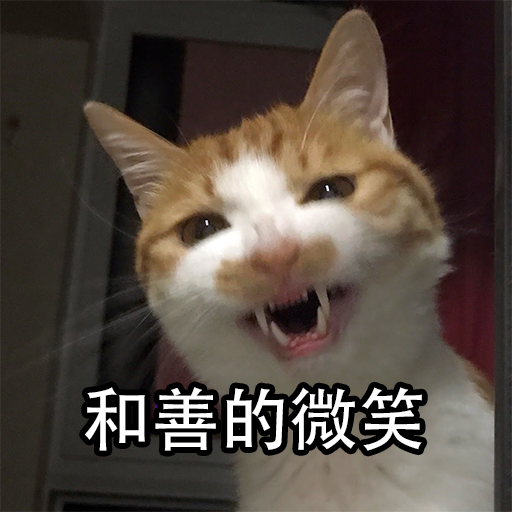
<style>
.page{position:relative;width:512px;height:512px}
.page>*{position:absolute;margin:0}
.t1{font:68.9px "AdobeHeitiStd-Regular";color:#ffffff}
</style>
<div class="page">
<p class="t1" style="left:85px;top:387px;width:337px;height:64px">和善的微笑</p>
</div>
